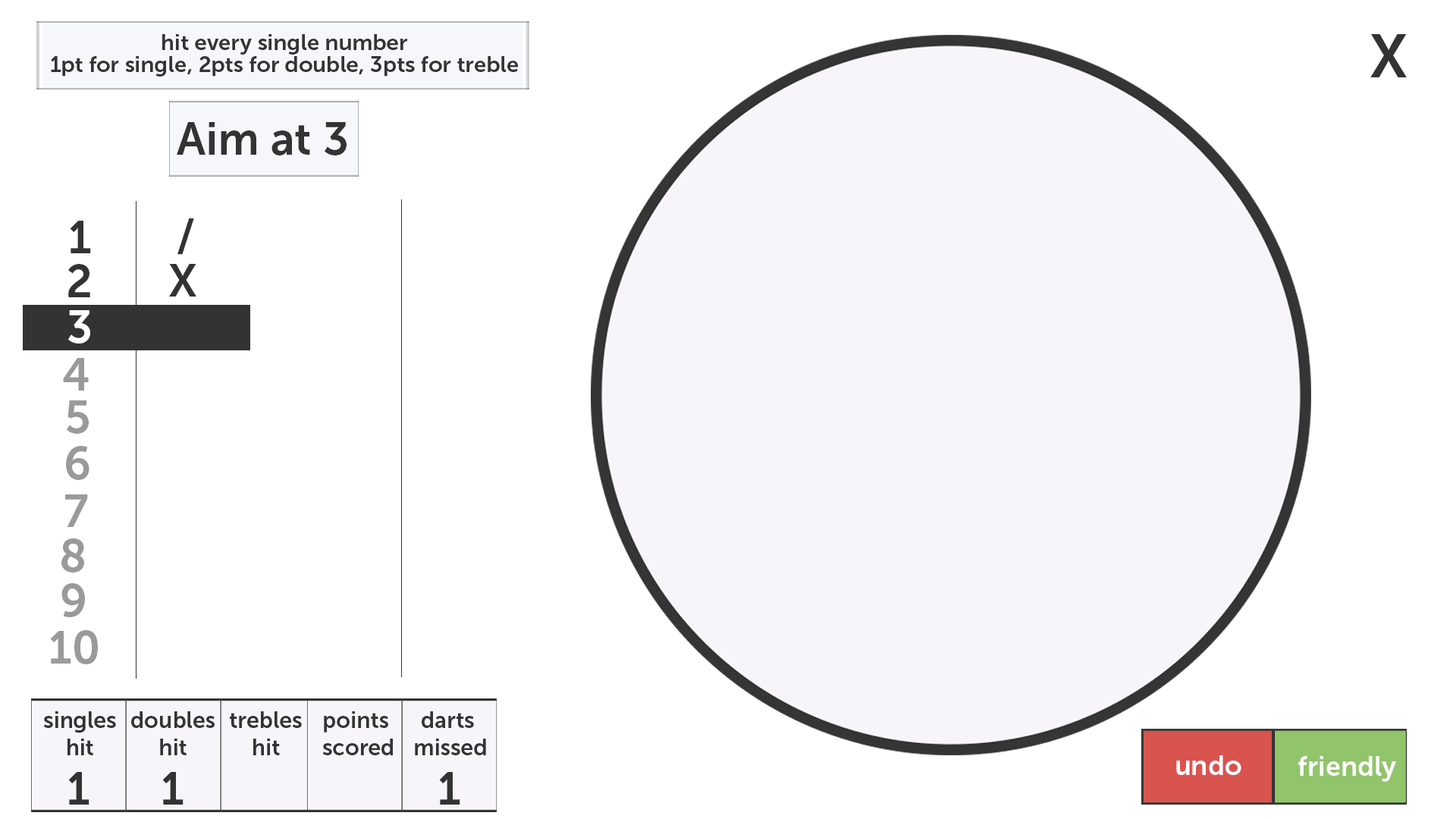
<style>
.page{position:relative;width:1456px;height:819px;background:#ffffff}
.page>*{position:absolute;margin:0}
.t1{font:21.5px/21.5px "MuseoSans-700";color:#333333;scale:1.04 1}
.t2{font:60.7px "MuseoSans-700";color:#333333}
.t3{font:45.5px "MuseoSans-700";color:#333333}
.t4{font:45.5px "MuseoSans-700";color:#ffffff}
.t5{font:45.5px "MuseoSans-700";color:#9a9a9a}
.t6{font:22.7px/27.3px "MuseoSans-700";color:#333333}
.t7{font:27.3px "MuseoSans-700";color:#ffffff}
</style>
<div class="page">
<p class="t1" style="left:51px;top:34px;width:467px;height:43px;text-align:center">hit every single number<br>1pt for single, 2pts for double, 3pts for treble</p>
<p class="t2" style="left:1370px;top:34px;width:37px;height:43px">X</p>
<p class="t3" style="left:177px;top:122px;width:170px;height:33px">Aim at 3</p>
<p class="t3" style="left:70px;top:221px;width:21px;height:32px">1</p>
<p class="t3" style="left:177px;top:218px;width:17px;height:37px">/</p>
<p class="t3" style="left:68px;top:264px;width:22px;height:33px">2</p>
<p class="t3" style="left:169px;top:264px;width:27px;height:33px">X</p>
<p class="t4" style="left:68px;top:310px;width:22px;height:34px">3</p>
<p class="t5" style="left:63px;top:358px;width:26px;height:33px">4</p>
<p class="t5" style="left:67px;top:400px;width:22px;height:34px">5</p>
<p class="t5" style="left:66px;top:446px;width:23px;height:34px">6</p>
<p class="t5" style="left:65px;top:494px;width:23px;height:33px">7</p>
<p class="t5" style="left:61px;top:538px;width:23px;height:35px">8</p>
<p class="t5" style="left:61px;top:583px;width:24px;height:34px">9</p>
<p class="t5" style="left:50px;top:630px;width:48px;height:34px">10</p>
<p class="t6" style="left:43px;top:711px;width:73px;height:44px;text-align:center">singles<br>hit</p>
<p class="t6" style="left:131px;top:711px;width:84px;height:44px;text-align:center">doubles<br>hit</p>
<p class="t6" style="left:230px;top:711px;width:72px;height:44px;text-align:center">trebles<br>hit</p>
<p class="t6" style="left:322px;top:711px;width:71px;height:44px;text-align:center">points <br>scored</p>
<p class="t6" style="left:415px;top:711px;width:71px;height:44px;text-align:center">darts <br>missed</p>
<p class="t7" style="left:1176px;top:755px;width:65px;height:20px">undo</p>
<p class="t7" style="left:1298px;top:756px;width:98px;height:26px">friendly</p>
<p class="t3" style="left:68px;top:772px;width:21px;height:33px">1</p>
<p class="t3" style="left:162px;top:772px;width:22px;height:33px">1</p>
<p class="t3" style="left:439px;top:772px;width:21px;height:33px">1</p>
</div>
